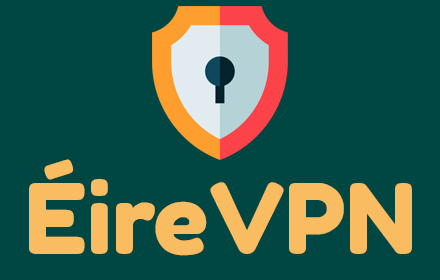
<style>
.page{position:relative;width:440px;height:280px;background:#004643}
.page>*{position:absolute;margin:0}
.t1{font:97px "FredokaOne-Regular";color:#f9bc60}
</style>
<div class="page">
<p class="t1" style="left:29px;top:159px;width:383px;height:97px">ÉireVPN</p>
</div>
